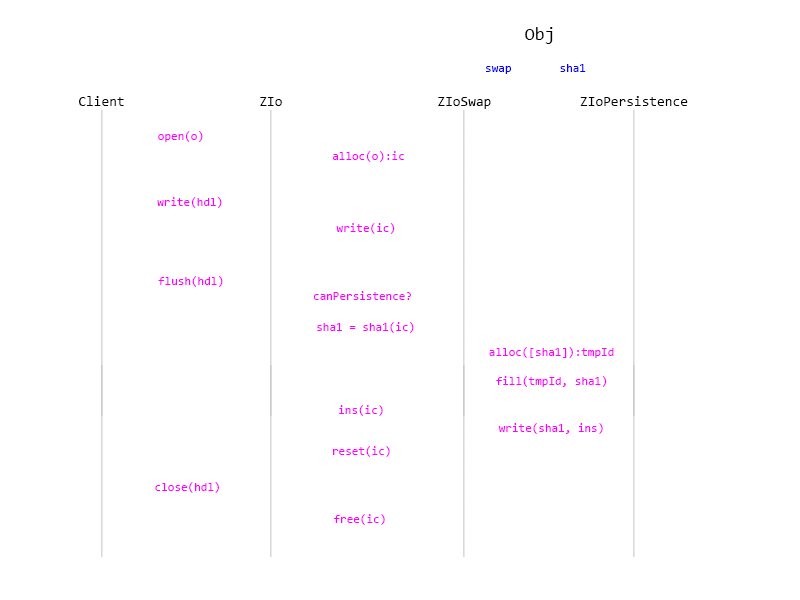
<style>
.page{position:relative;width:800px;height:600px;background:#ffffff}
.page>*{position:absolute;margin:0}
.t1{font:18px "Consolas";color:#000000}
.t2{font:12px "Consolas";color:#0000ff}
.t3{font:14px "Consolas";color:#000000}
.t4{font:12px "Consolas";color:#ff00ff}
</style>
<div class="page">
<p class="t1" style="left:525px;top:27px;width:28px;height:17px">Obj</p>
<p class="t2" style="left:560px;top:64px;width:26px;height:8px">sha1</p>
<p class="t2" style="left:486px;top:66px;width:25px;height:8px">swap</p>
<p class="t3" style="left:79px;top:96px;width:45px;height:10px">Client</p>
<p class="t3" style="left:260px;top:97px;width:22px;height:9px">ZIo</p>
<p class="t3" style="left:438px;top:97px;width:53px;height:12px">ZIoSwap</p>
<p class="t3" style="left:580px;top:96px;width:108px;height:10px">ZIoPersistence</p>
<p class="t4" style="left:158px;top:131px;width:45px;height:11px">open(o)</p>
<p class="t4" style="left:332px;top:151px;width:72px;height:11px">alloc(o):ic</p>
<p class="t4" style="left:157px;top:197px;width:65px;height:11px">write(hdl)</p>
<p class="t4" style="left:336px;top:223px;width:59px;height:11px">write(ic)</p>
<p class="t4" style="left:158px;top:276px;width:65px;height:11px">flush(hdl)</p>
<p class="t4" style="left:313px;top:291px;width:98px;height:9px">canPersistence?</p>
<p class="t4" style="left:317px;top:322px;width:97px;height:11px">sha1 = sha1(ic)</p>
<p class="t4" style="left:489px;top:347px;width:125px;height:11px">alloc([sha1]):tmpId</p>
<p class="t4" style="left:496px;top:376px;width:111px;height:11px">fill(tmpId, sha1)</p>
<p class="t4" style="left:339px;top:405px;width:44px;height:11px">ins(ic)</p>
<p class="t4" style="left:498px;top:423px;width:105px;height:11px">write(sha1, ins)</p>
<p class="t4" style="left:333px;top:446px;width:57px;height:11px">reset(ic)</p>
<p class="t4" style="left:155px;top:482px;width:64px;height:11px">close(hdl)</p>
<p class="t4" style="left:333px;top:514px;width:52px;height:11px">free(ic)</p>
</div>
